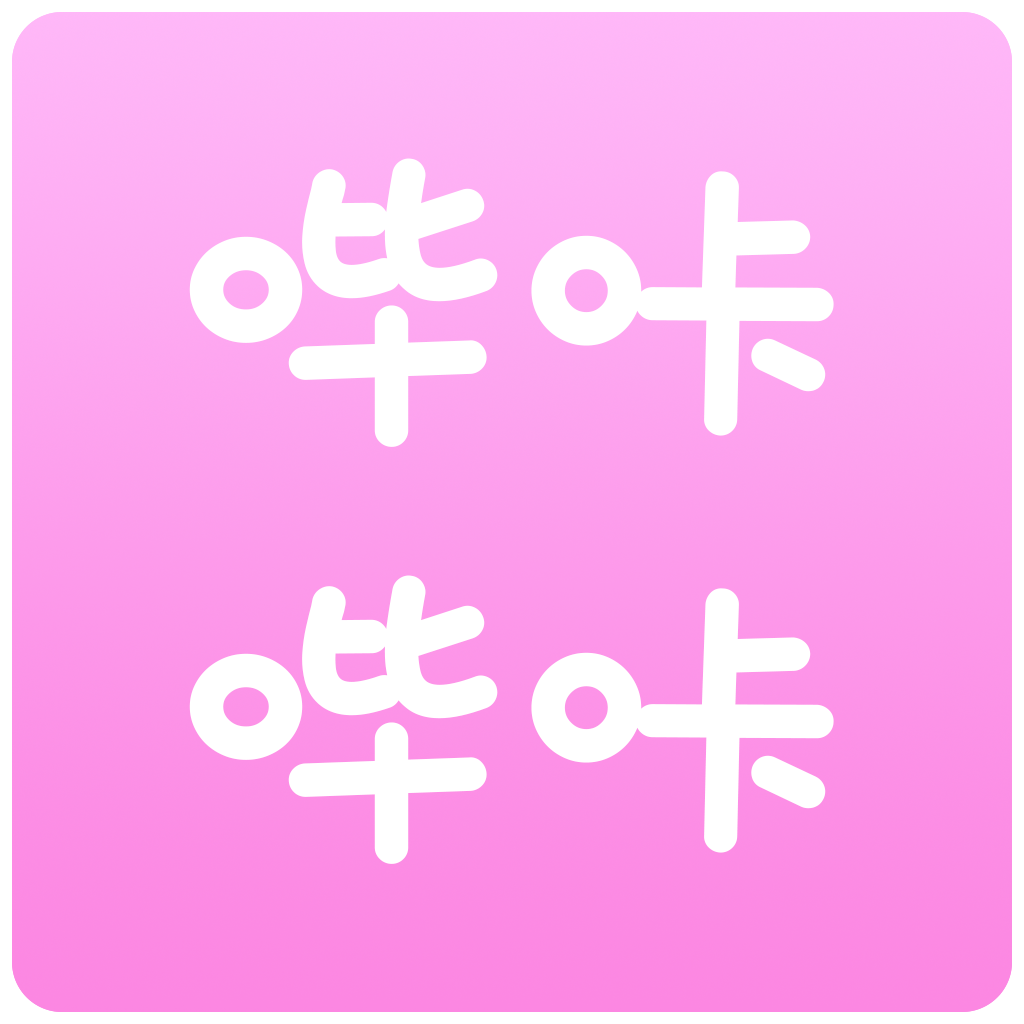
<style>
.page{position:relative;width:1024px;height:1024px}
.page>*{position:absolute;margin:0}
.t1{font:333.3px/416.7px "HYLeMiaoTiW";color:#ffffff;font-weight:bold}
</style>
<div class="page">
<p class="t1" style="left:189px;top:158px;width:645px;height:706px;text-align:center">哔咔<br>哔咔</p>
</div>
